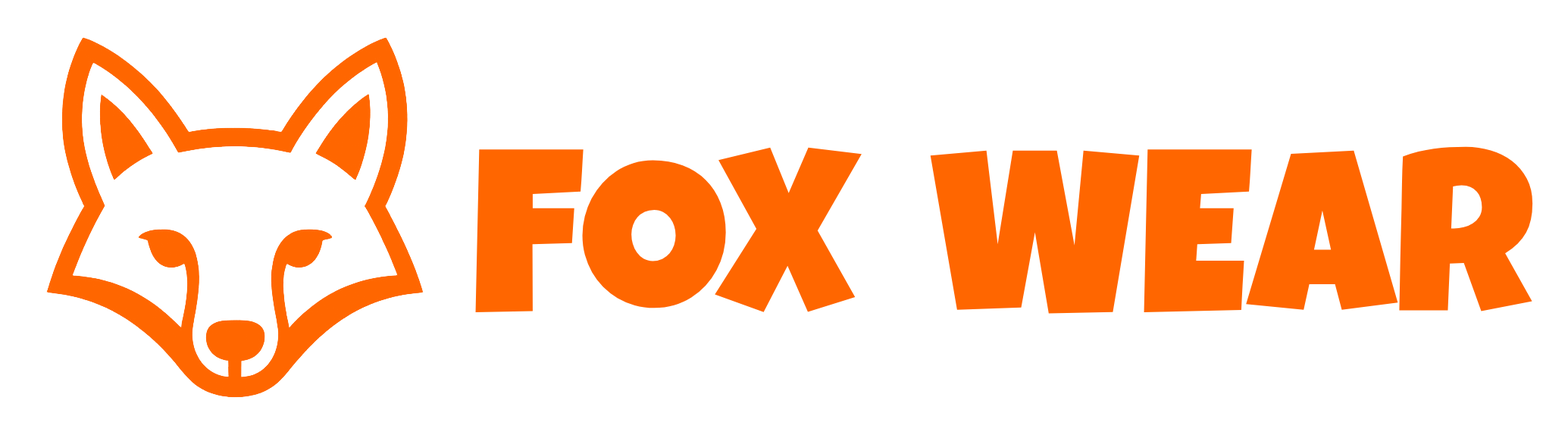
<style>
.page{position:relative;width:1568px;height:435px;background:#ffffff}
.page>*{position:absolute;margin:0}
.t1{font:231.1px "LuckiestGuy-Regular";color:#ff6600}
</style>
<div class="page">
<p class="t1" style="left:475px;top:147px;width:387px;height:165px">FOX</p>
<p class="t1" style="left:930px;top:146px;width:603px;height:168px">WEAR</p>
</div>
